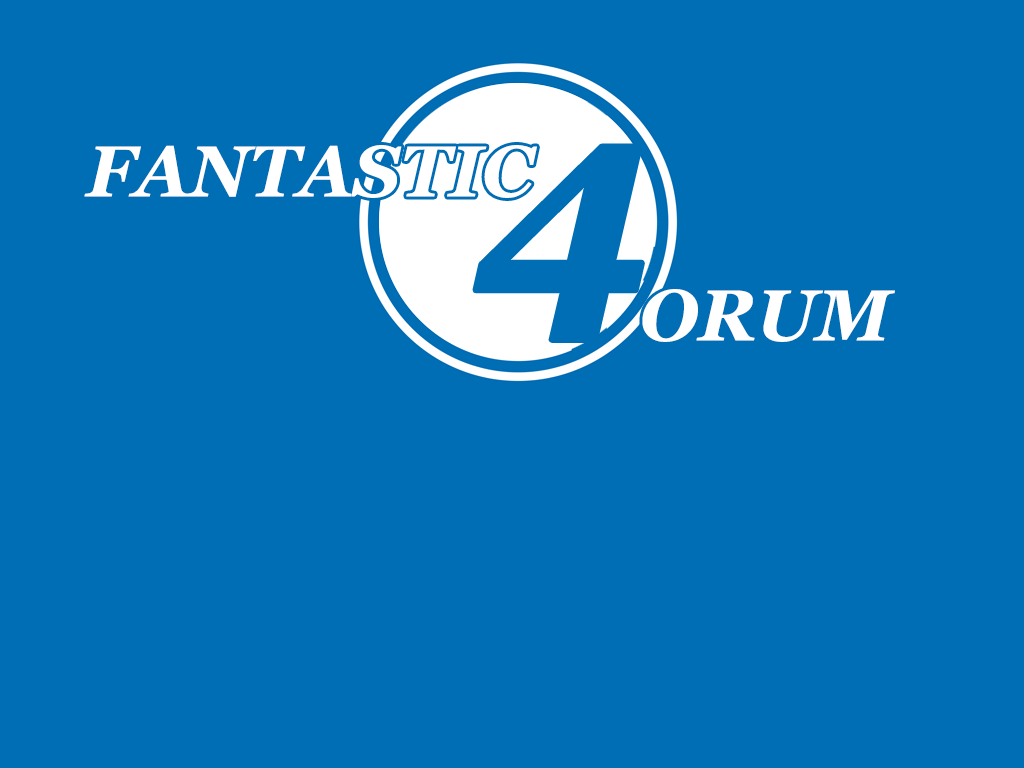
<style>
.page{position:relative;width:1024px;height:768px;background:#006eb5}
.page>*{position:absolute;margin:0}
.t1{font:72px "Georgia-BoldItalic";color:#ffffff}
</style>
<div class="page">
<p class="t1" style="left:84px;top:145px;width:453px;height:53px">FANTASTIC</p>
<p class="t1" style="left:642px;top:289px;width:253px;height:53px">ORUM</p>
</div>
